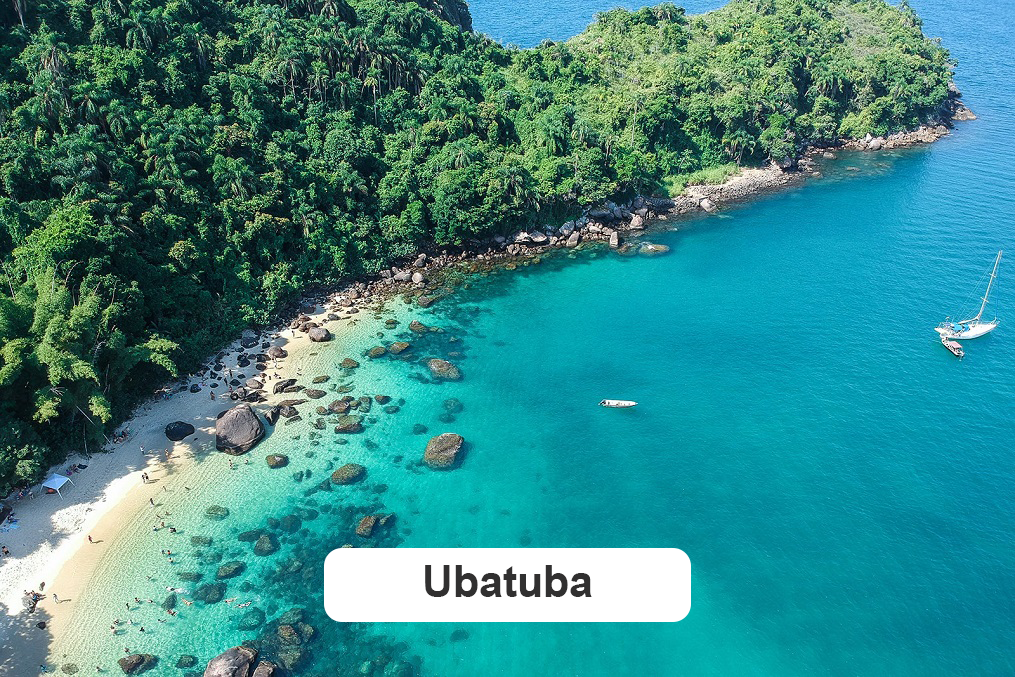
<style>
.page{position:relative;width:1015px;height:677px}
.page>*{position:absolute;margin:0}
.t1{font:43.9px "Arial-BoldMT";color:#313030}
</style>
<div class="page">
<p class="t1" style="left:425px;top:565px;width:167px;height:32px">Ubatuba</p>
</div>
